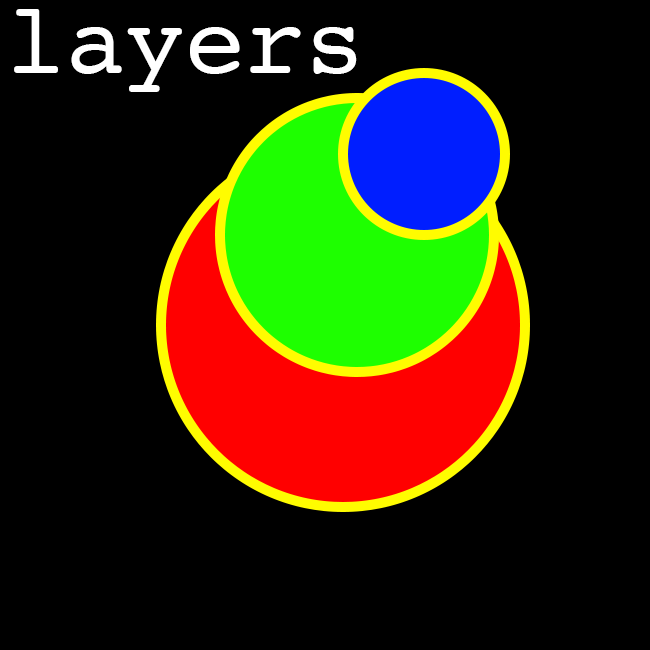
<style>
.page{position:relative;width:650px;height:650px;background:#000000}
.page>*{position:absolute;margin:0}
.t1{font:100px "Courier";color:#ffffff}
</style>
<div class="page">
<p class="t1" style="left:14px;top:9px;width:343px;height:83px">layers</p>
</div>
